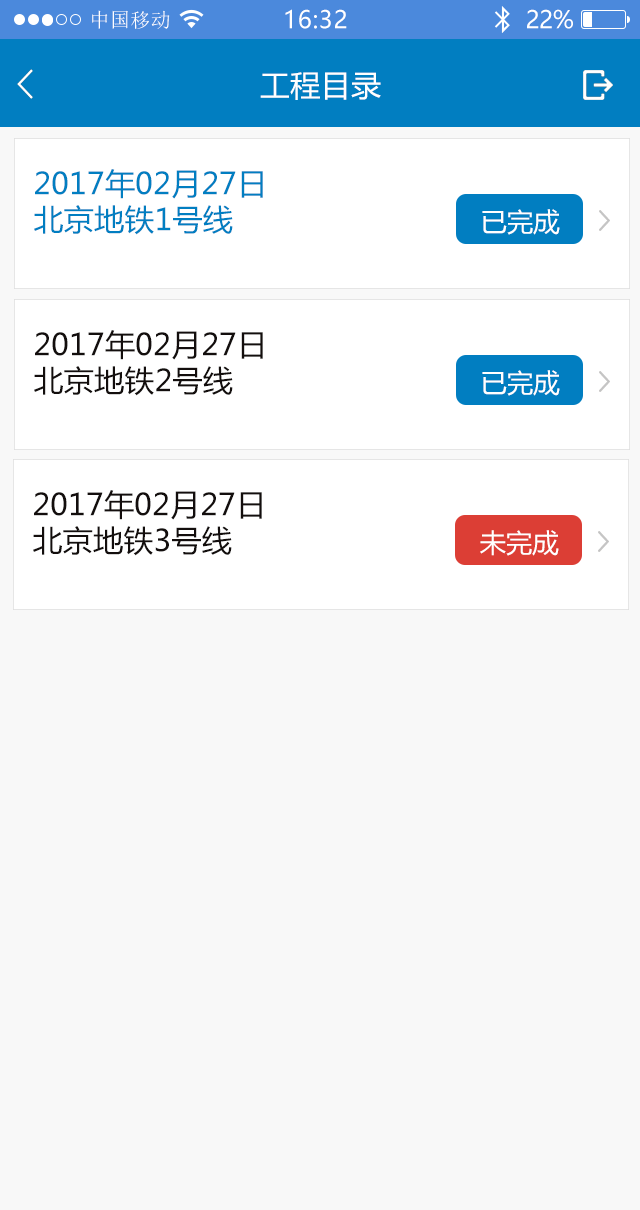
<style>
.page{position:relative;width:640px;height:1210px;background:#f8f8f8}
.page>*{position:absolute;margin:0}
.t1{font:20px "SimSun";letter-spacing:0.02em;color:#ffffff}
.t2{font:24px "MicrosoftYaHei";letter-spacing:0.025em;color:#ffffff}
.t3{font:24px "MicrosoftYaHei";letter-spacing:-0.02em;color:#ffffff}
.t4{font:30px "MicrosoftYaHei";letter-spacing:0.01em;color:#ffffff}
.t5{font:30px "MicrosoftYaHei";letter-spacing:0.01em;color:#017ec1}
.t6{font:26.2px "MicrosoftYaHei";letter-spacing:0.01em;color:#ffffff}
.t7{font:30px "MicrosoftYaHei";letter-spacing:0.01em;color:#130e0d}
</style>
<div class="page">
<p class="t1" style="left:92px;top:10px;width:78px;height:19px">中国移动</p>
<p class="t2" style="left:285px;top:9px;width:62px;height:20px">16:32</p>
<p class="t3" style="left:527px;top:9px;width:46px;height:20px">22%</p>
<p class="t4" style="left:260px;top:72px;width:121px;height:28px">工程目录</p>
<p class="t5" style="left:34px;top:169px;width:229px;height:66px">2017年02月27日<br>北京地铁1号线</p>
<p class="t6" style="left:482px;top:209px;width:78px;height:26px">已完成</p>
<p class="t7" style="left:34px;top:330px;width:229px;height:66px">2017年02月27日<br>北京地铁2号线</p>
<p class="t6" style="left:482px;top:370px;width:78px;height:26px">已完成</p>
<p class="t7" style="left:33px;top:490px;width:229px;height:66px">2017年02月27日<br>北京地铁3号线</p>
<p class="t6" style="left:480px;top:530px;width:79px;height:26px">未完成</p>
</div>
